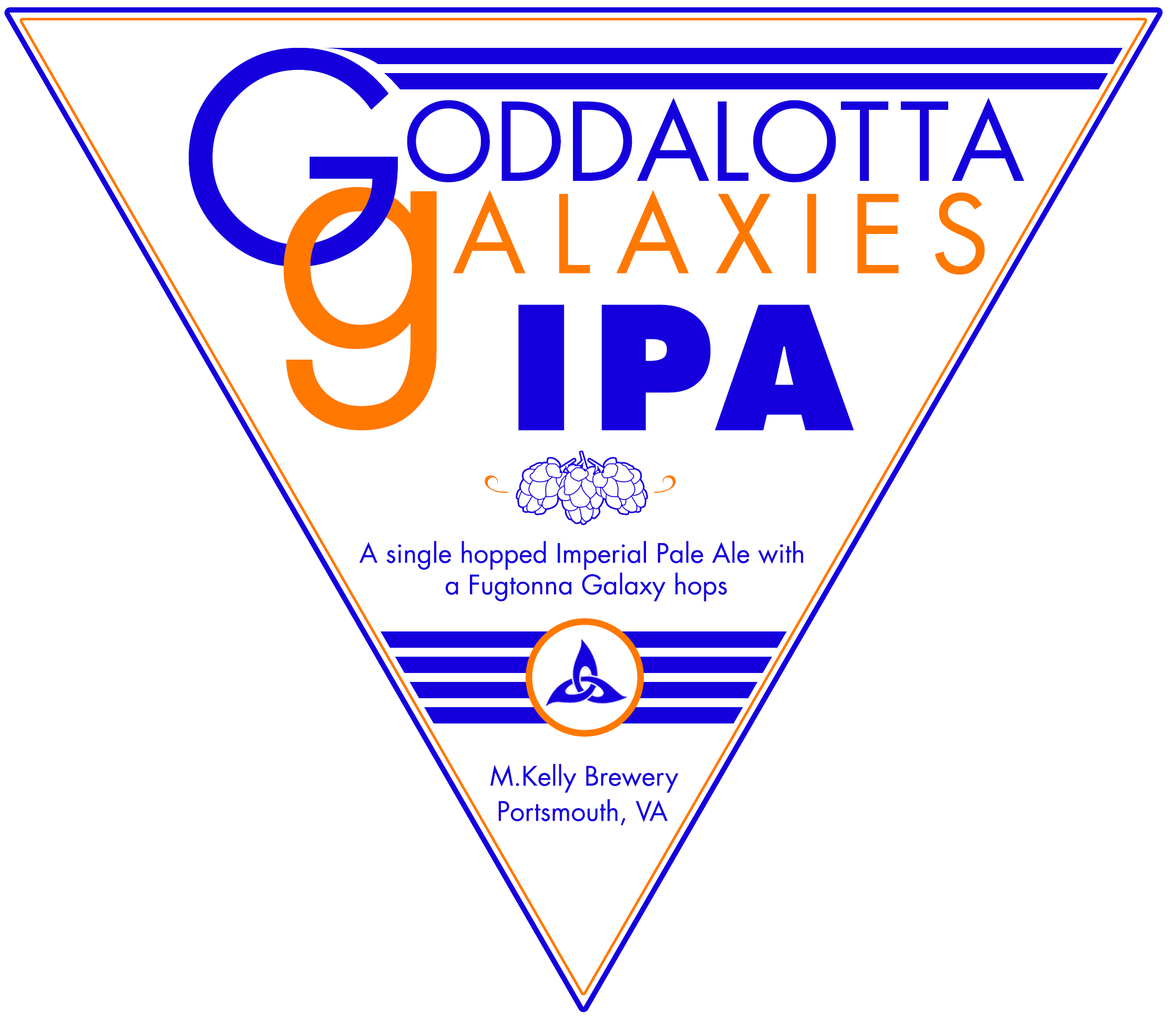
<style>
.page{position:relative;width:1169px;height:1020px;background:#ffffff}
.page>*{position:absolute;margin:0}
.t1{font:280.4px "FuturaLT-Book";letter-spacing:0.075em;color:#1500dd}
.t2{font:105.1px "FuturaLT-Book";color:#1500dd}
.t3{font:105.1px "FuturaLT-Book";letter-spacing:0.1em;color:#1500dd}
.t4{font:326.4px "FuturaLT-Book";letter-spacing:0.075em;color:#ff7800}
.t5{font:105.1px "FuturaLT-Book";letter-spacing:0.24em;color:#ff7800}
.t6{font:166.5px "FuturaLT-ExtraBold";letter-spacing:0.1em;color:#1500dd}
.t7{font:6.3px "FuturaLT-Book";color:#1500dd}
.t8{font:26.3px "FuturaLT-Book";color:#1500dd}
</style>
<div class="page">
<p class="t1" style="left:189px;top:48px;width:209px;height:219px">G</p>
<p class="t2" style="left:407px;top:98px;width:618px;height:84px">ODDALO<span class="t3">TT</span>A</p>
<p class="t4" style="left:283px;top:187px;width:154px;height:244px">g</p>
<p class="t5" style="left:453px;top:190px;width:532px;height:85px">ALAXIES</p>
<p class="t6" style="left:518px;top:304px;width:336px;height:127px">IPA</p>
<p class="t7" style="left:359px;top:541px;width:444px;height:60px;text-align:center">A single hopped Imperial Pale Ale with <br>a Fugtonna Galaxy hops</p>
<p class="t8" style="left:490px;top:764px;width:189px;height:29px">M.Kelly Brewery</p>
<p class="t8" style="left:498px;top:799px;width:170px;height:26px">Portsmouth, VA</p>
</div>
